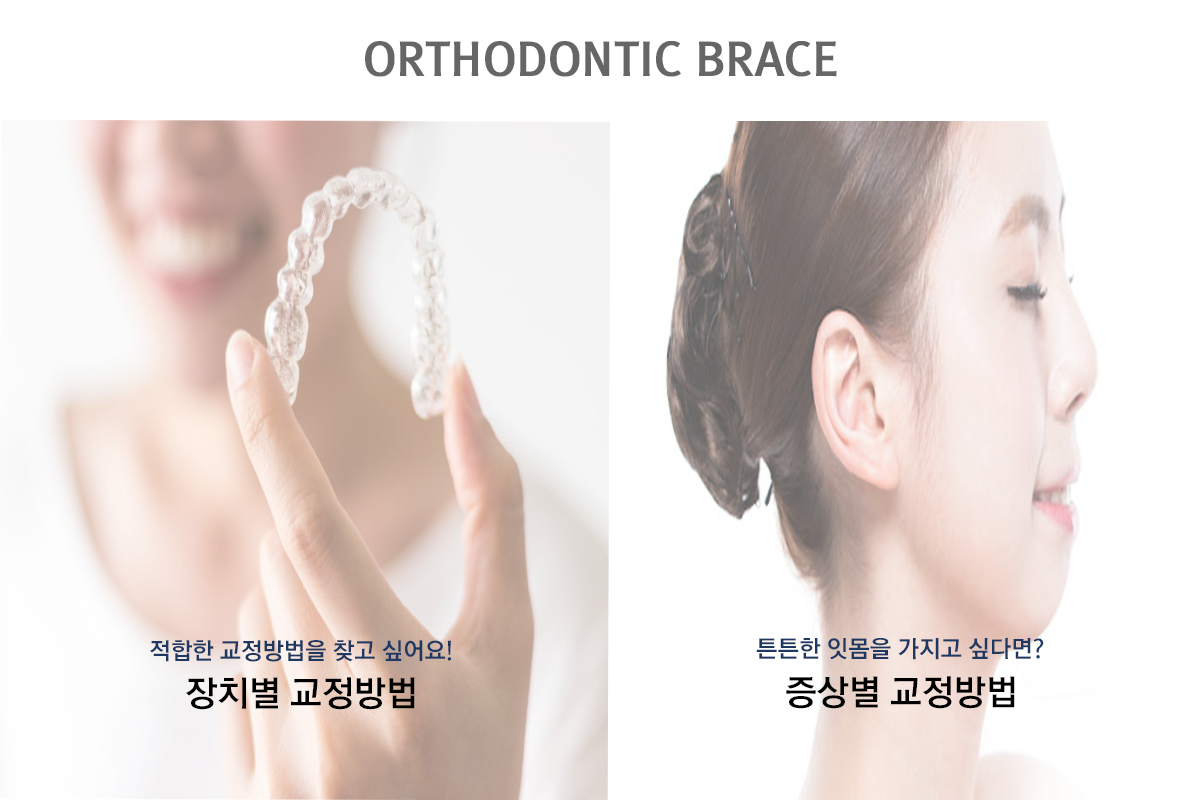
<style>
.page{position:relative;width:1200px;height:800px;background:#ffffff}
.page>*{position:absolute;margin:0}
.t1{font:44.7px "RixGoB";color:#676565;font-weight:bold}
.t2{font:23.4px "RixGoB";color:#1d3862}
.t3{font:23.6px "RixGoB";color:#1d3862}
.t4{font:35px "RixGoB";color:#000000}
</style>
<div class="page">
<p class="t1" style="left:365px;top:41px;width:472px;height:36px">ORTHODONTIC BRACE</p>
<p class="t2" style="left:150px;top:640px;width:301px;height:22px">적합한 교정방법을 찾고 싶어요!</p>
<p class="t3" style="left:756px;top:638px;width:288px;height:22px">튼튼한 잇몸을 가지고 싶다면?</p>
<p class="t4" style="left:186px;top:677px;width:229px;height:33px">장치별 교정방법</p>
<p class="t4" style="left:786px;top:676px;width:229px;height:33px">증상별 교정방법</p>
</div>
